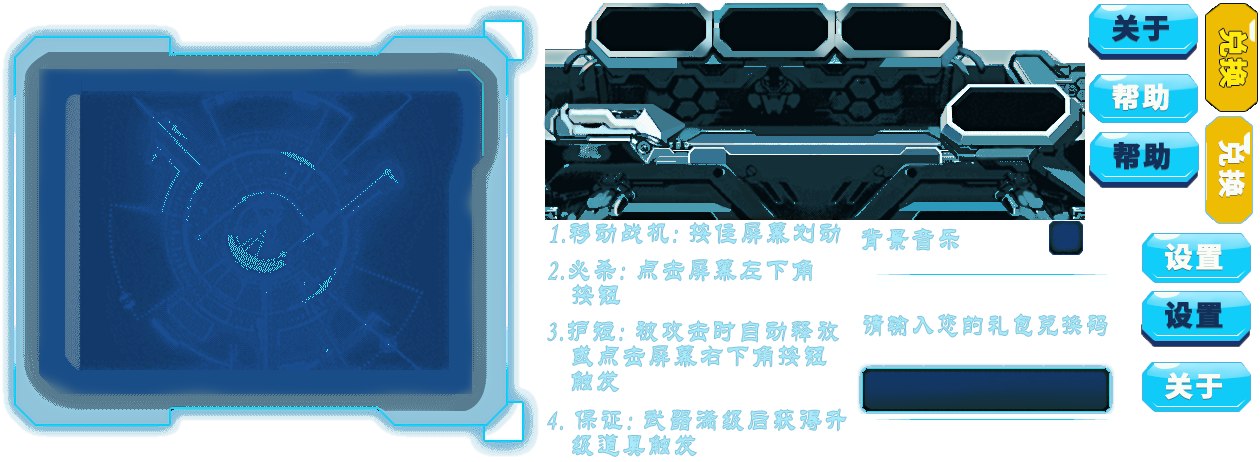
<style>
.page{position:relative;width:1260px;height:462px;background:#ffffff}
.page>*{position:absolute;margin:0}
.t1{font:27.8px "SourceHanSansCN-Heavy";letter-spacing:0.08em;color:#123059;font-weight:bold}
.t2{font:28.5px "SourceHanSansCN-Heavy";letter-spacing:0.08em;color:#ffea0b;font-weight:bold}
.t3{font:27.3px "SourceHanSansCN-Heavy";letter-spacing:0.08em;color:#f9fcf6;font-weight:bold}
.t4{font:27.2px "SourceHanSansCN-Heavy";letter-spacing:0.08em;color:#f9fcf6;font-weight:bold}
.t5{font:30px "STLiti";letter-spacing:0.08em;color:#a7ebfb;font-weight:bold;scale:0.78 1}
.t6{font:27.8px "SourceHanSansCN-Heavy";letter-spacing:0.08em;color:#fafcf6;font-weight:bold}
.t7{font:30px/25px "STLiti";letter-spacing:0.08em;color:#a7ebfb;font-weight:bold;scale:0.78 1}
.t8{font:30px "STLiti";letter-spacing:0.08em;color:#a7ebfb;font-weight:bold;scale:0.75 1}
.t9{font:27.8px "SourceHanSansCN-Heavy";letter-spacing:0.08em;color:#f9fcf6;font-weight:bold}
</style>
<div class="page">
<p class="t1" style="left:1112px;top:14px;width:57px;height:28px">关于</p>
<p class="t2" style="left:1219px;top:28px;width:28px;height:59px;rotate:90deg">兑换</p>
<p class="t3" style="left:1112px;top:83px;width:57px;height:28px">帮助</p>
<p class="t1" style="left:1113px;top:142px;width:57px;height:28px">帮助</p>
<p class="t4" style="left:1218px;top:140px;width:27px;height:57px;rotate:90deg">兑换</p>
<p class="t5" style="left:549px;top:221px;width:292px;height:24px">1.移动战机: 按住屏幕划动</p>
<p class="t5" style="left:861px;top:228px;width:99px;height:23px">背景音乐</p>
<p class="t6" style="left:1165px;top:243px;width:58px;height:28px">设置</p>
<p class="t7" style="left:548px;top:258px;width:265px;height:48px">2.必杀: 点击屏幕左下角<br>   按钮</p>
<p class="t1" style="left:1165px;top:301px;width:58px;height:28px">设置</p>
<p class="t8" style="left:863px;top:313px;width:245px;height:25px">请输入您的礼包兑换码</p>
<p class="t7" style="left:547px;top:320px;width:293px;height:72px">3.护短: 被攻击时自动释放<br>   或点击屏幕右下角按钮<br>   触发</p>
<p class="t9" style="left:1165px;top:372px;width:57px;height:28px">关于</p>
<p class="t7" style="left:547px;top:408px;width:300px;height:49px">4. 保证: 武器满级后获得升<br>   级道具触发</p>
</div>
